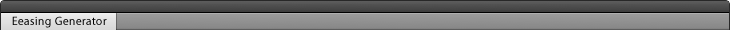
<style>
.page{position:relative;width:730px;height:30px}
.page>*{position:absolute;margin:0}
.t1{font:12px "MyriadPro-Regular";color:#000000}
</style>
<div class="page">
<p class="t1" style="left:12px;top:16px;width:95px;height:12px">Eeasing Generator</p>
</div>
